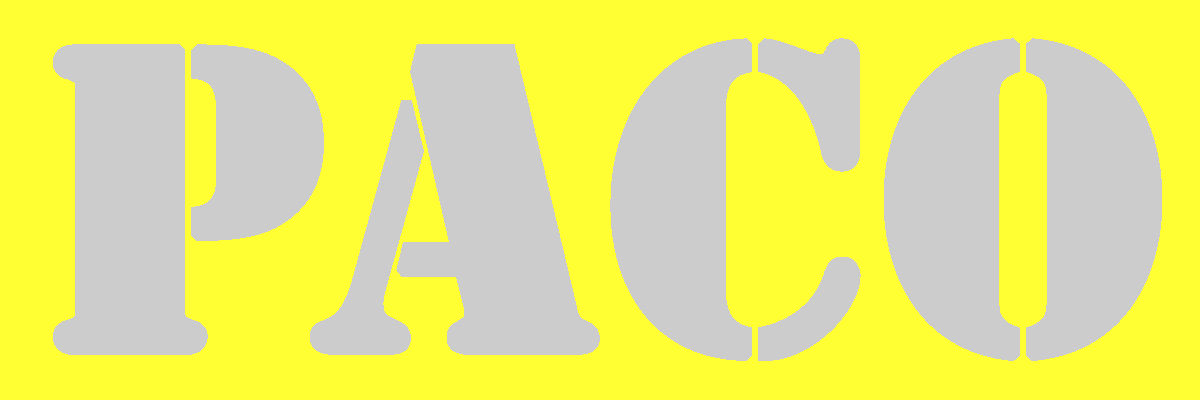
<style>
.page{position:relative;width:1200px;height:400px;background:#ffff33}
.page>*{position:absolute;margin:0}
.t1{font:400px "StencilStd";color:#cccccc;font-weight:bold}
</style>
<div class="page">
<p class="t1" style="left:53px;top:38px;width:1109px;height:323px">PaCo</p>
</div>
